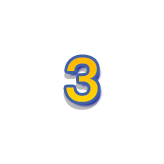
<style>
.page{position:relative;width:164px;height:164px;background:#ffffff}
.page>*{position:absolute;margin:0}
.t1{font:59.8px "PingFangHK-Semibold";color:#ffc500;text-transform:uppercase}
</style>
<div class="page">
<p class="t1" style="left:66px;top:57px;width:32px;height:45px">3</p>
</div>
